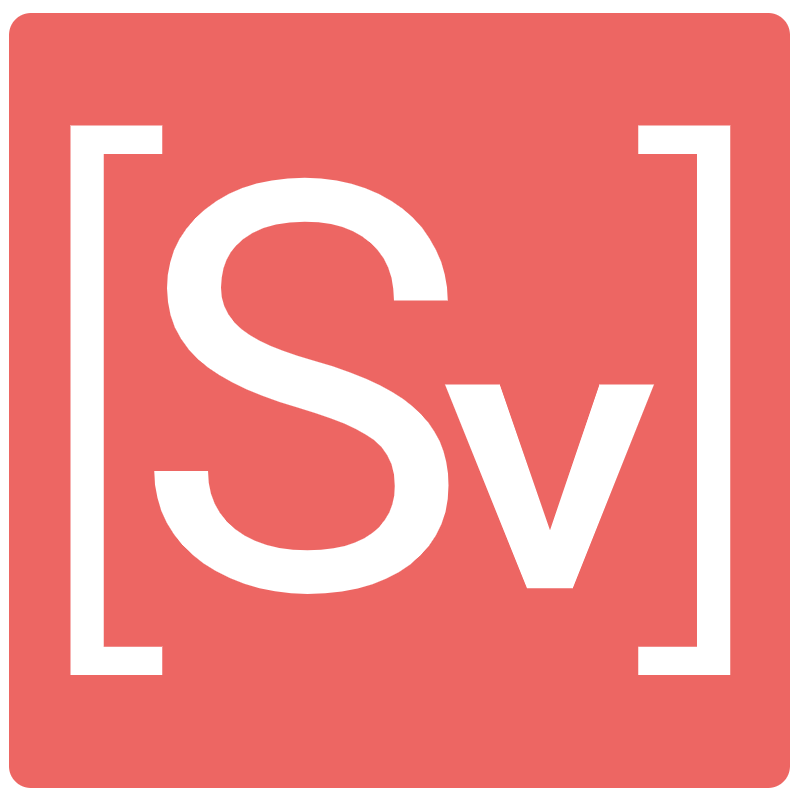
<style>
.page{position:relative;width:800px;height:800px;background:#ed6663}
.page>*{position:absolute;margin:0}
.t1{font:569.6px "Roboto-Light";letter-spacing:-0.052em;color:#ffffff}
.t2{font:569.6px "Roboto-Regular";letter-spacing:-0.052em;color:#ffffff}
.t3{font:385.7px "Roboto-Medium";letter-spacing:-0.052em;color:#ffffff;scale:1.15 1}
</style>
<div class="page">
<p class="t1" style="left:70px;top:125px;width:661px;height:551px">[<span class="t2">S</span><span class="t3">v</span>]</p>
</div>
